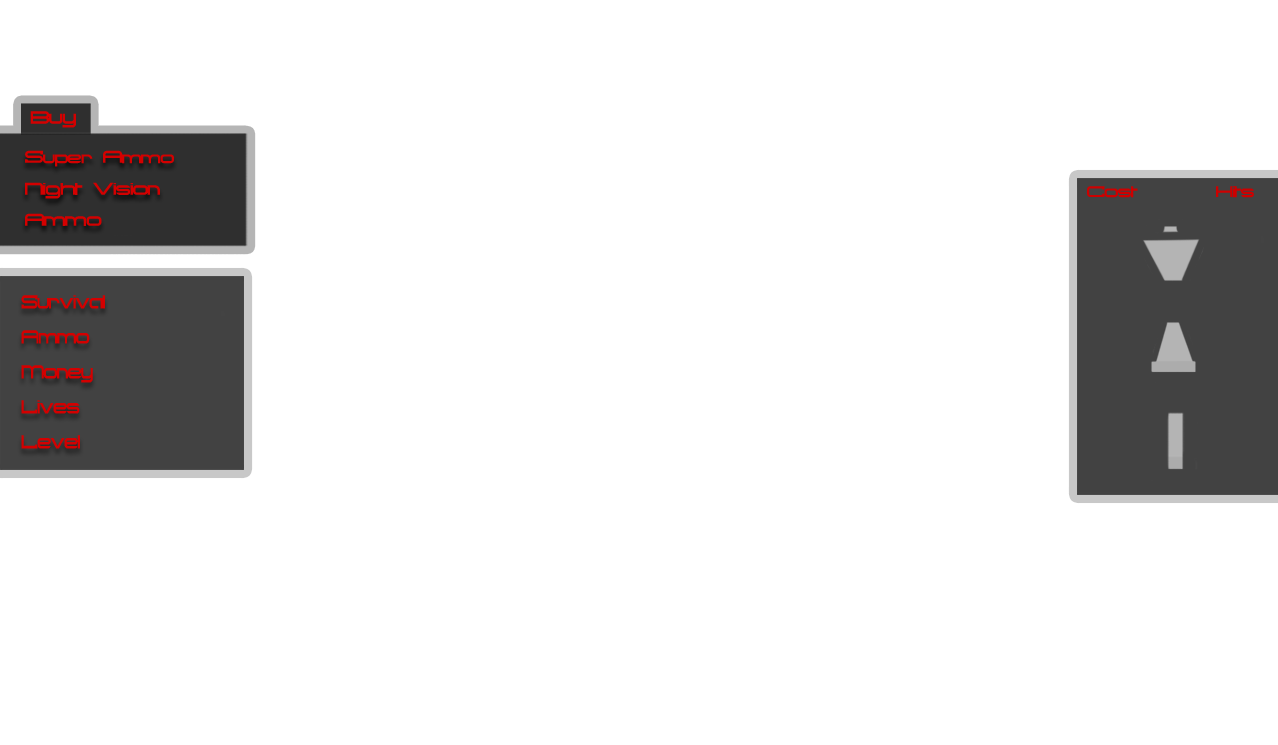
<style>
.page{position:relative;width:1278px;height:745px;background:#ffffff}
.page>*{position:absolute;margin:0}
.t1{font:27.4px "Troglodyte";letter-spacing:-0.04em;color:#d40000}
.t2{font:26.4px "Troglodyte";letter-spacing:-0.04em;color:#d40000}
.t3{font:24px "Troglodyte";letter-spacing:-0.04em;color:#d40000}
.t4{font:24px "Troglodyte";letter-spacing:-0.04em;color:#ce0000}
.t5{font:29.1px "Troglodyte";letter-spacing:-0.04em;color:#d40000;scale:0.8 1}
</style>
<div class="page">
<p class="t1" style="left:30px;top:111px;width:46px;height:17px">Buy</p>
<p class="t2" style="left:25px;top:150px;width:149px;height:76px">S<span class="t3">uper</span> A<span class="t3">mmo <br> </span>Night Vision<br> Ammo</p>
<p class="t4" style="left:1087px;top:186px;width:167px;height:12px">Cost        Hits</p>
<p class="t5" style="left:21px;top:295px;width:84px;height:154px">Survival<br>Ammo <br>Money <br>Lives<br>Level</p>
</div>
